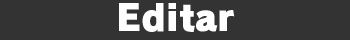
<style>
.page{position:relative;width:350px;height:40px;background:#333333}
.page>*{position:absolute;margin:0}
.t1{font:36px "RodinPro-UB";color:#fffeff}
</style>
<div class="page">
<p class="t1" style="left:119px;top:3px;width:116px;height:29px">Editar</p>
</div>
